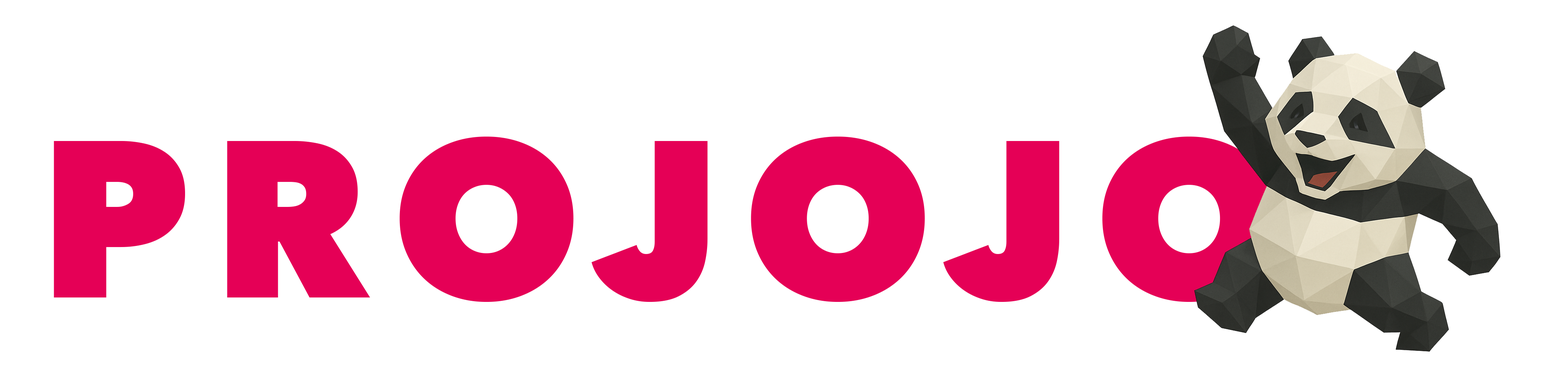
<style>
.page{position:relative;width:1568px;height:377px;background:#ffffff}
.page>*{position:absolute;margin:0}
.t1{font:220.7px "AvenirNext-Heavy";letter-spacing:0.1em;color:#e50056}
</style>
<div class="page">
<p class="t1" style="left:54px;top:136px;width:1222px;height:166px">PROJOJO</p>
</div>
